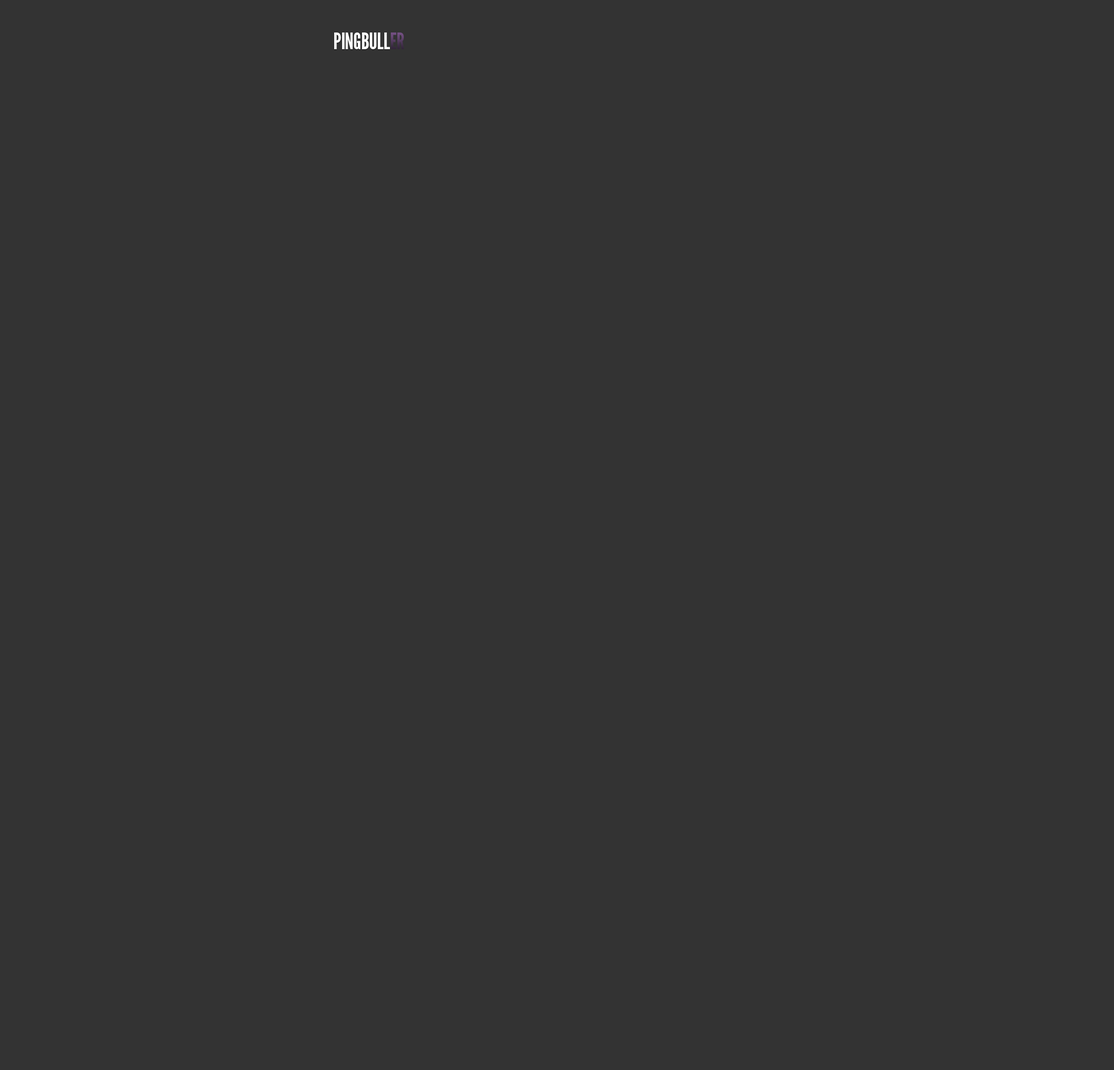
<style>
.page{position:relative;width:1114px;height:1070px;background:#333333}
.page>*{position:absolute;margin:0}
.t1{font:22.3px "LeagueGothic";color:#ffffff}
.t2{font:22.3px "LeagueGothic"}
</style>
<div class="page">
<p class="t1" style="left:334px;top:32px;width:56px;height:17px">PINGBULL</p>
<p class="t2" style="left:391px;top:32px;width:13px;height:17px">ER</p>
</div>
